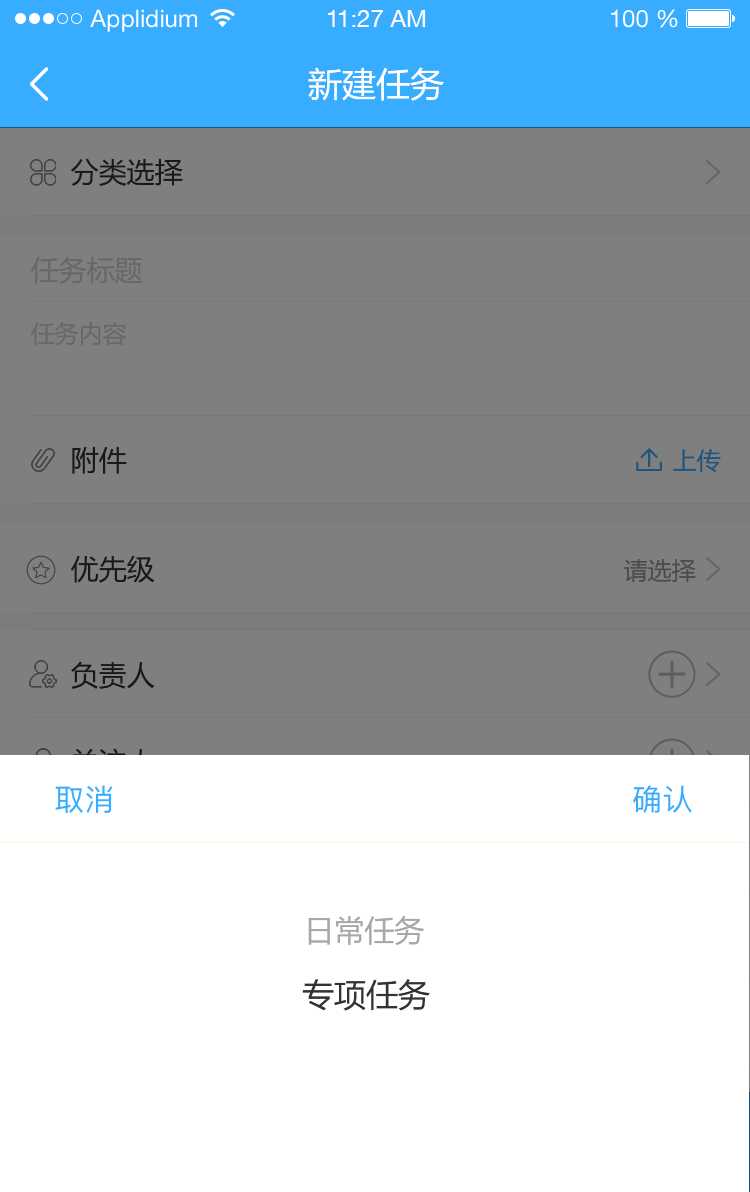
<style>
.page{position:relative;width:750px;height:1192px;background:#7f7f7f}
.page>*{position:absolute;margin:0}
.t1{font:24px "HelveticaNeueLTStd-Roman";color:#ffffff}
.t2{font:24px "HelveticaNeueCE-Roman";color:#ffffff}
.t3{font:34px "MicrosoftYaHei";color:#ffffff}
.t4{font:28px "MicrosoftYaHei";color:#191919}
.t5{font:28px "MicrosoftYaHei";color:#686868}
.t6{font:24px "MicrosoftYaHei";color:#686868}
.t7{font:24px "MicrosoftYaHei";color:#1c567f}
.t8{font:24px "MicrosoftYaHei";color:#4c4c4c}
.t9{font:30px "MicrosoftYaHei";color:#a8a8a8}
.t10{font:32px "MicrosoftYaHei";color:#333333}
</style>
<div class="page">
<p class="t1" style="left:90px;top:9px;width:107px;height:23px">Applidium</p>
<p class="t2" style="left:328px;top:10px;width:98px;height:17px">11:27 AM</p>
<p class="t1" style="left:611px;top:9px;width:67px;height:19px">100 %</p>
<p class="t3" style="left:308px;top:67px;width:136px;height:34px">新建任务</p>
<p class="t4" style="left:71px;top:158px;width:112px;height:28px">分类选择</p>
<p class="t5" style="left:31px;top:256px;width:111px;height:28px">任务标题</p>
<p class="t6" style="left:31px;top:321px;width:96px;height:25px">任务内容</p>
<p class="t4" style="left:72px;top:446px;width:55px;height:28px">附件</p>
<p class="t7" style="left:673px;top:449px;width:48px;height:23px">上传</p>
<p class="t4" style="left:71px;top:555px;width:84px;height:28px">优先级</p>
<p class="t8" style="left:624px;top:559px;width:72px;height:23px">请选择</p>
<p class="t4" style="left:71px;top:661px;width:84px;height:28px">负责人</p>
<p class="t9" style="left:308px;top:915px;width:116px;height:31px">日常任务</p>
<p class="t10" style="left:302px;top:979px;width:128px;height:32px">专项任务</p>
</div>
